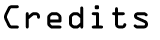
<style>
.page{position:relative;width:160px;height:40px;background:#ffffff}
.page>*{position:absolute;margin:0}
.t1{font:30px "OCRAStd";color:#010101}
</style>
<div class="page">
<p class="t1" style="left:4px;top:5px;width:144px;height:24px">Credits</p>
</div>
